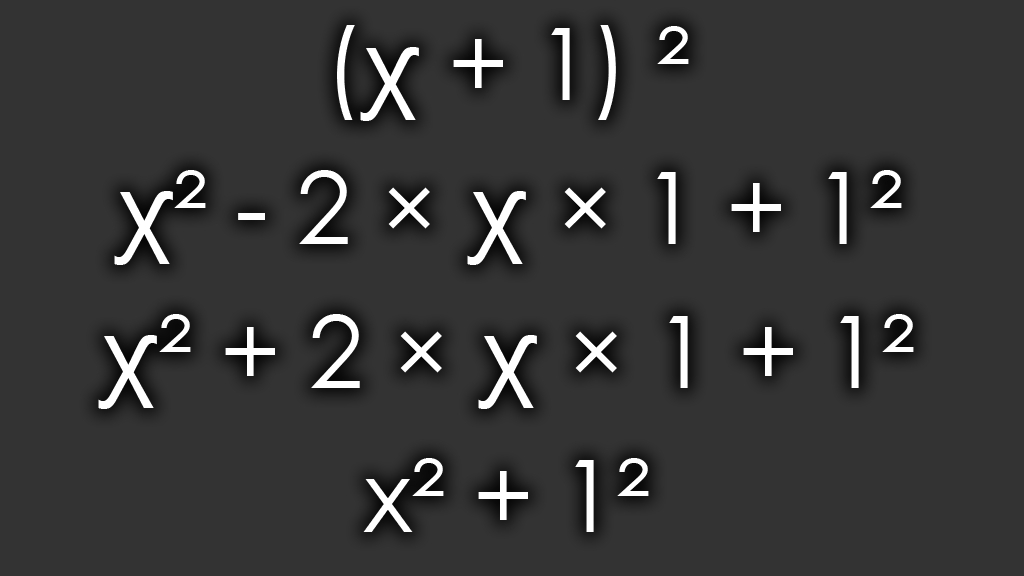
<style>
.page{position:relative;width:1024px;height:576px;background:#333333}
.page>*{position:absolute;margin:0}
.t1{font:100px "CenturyGothic";color:#ffffff}
.t2{font:100px "ArialMT";color:#ffffff}
</style>
<div class="page">
<p class="t1" style="left:337px;top:25px;width:352px;height:96px">(<span class="t2">ꭕ</span> + 1) ²</p>
<p class="t1" style="left:114px;top:170px;width:788px;height:95px"><span class="t2">ꭕ</span>² - 2 × <span class="t2">ꭕ</span> × 1 + 1²</p>
<p class="t1" style="left:98px;top:314px;width:816px;height:95px"><span class="t2">ꭕ</span>² + 2 × <span class="t2">ꭕ </span>× 1 + 1²</p>
<p class="t1" style="left:363px;top:458px;width:286px;height:74px">x² + 1²</p>
</div>
